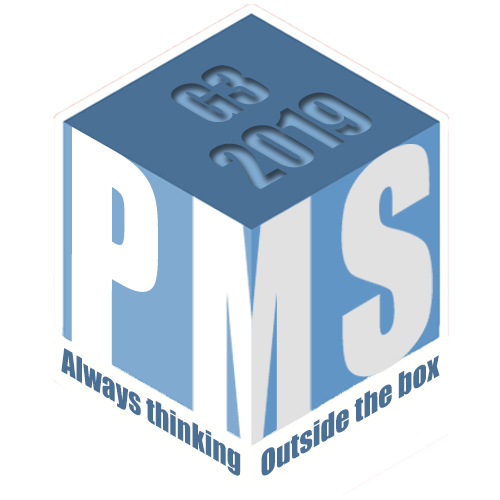
<style>
.page{position:relative;width:500px;height:500px;background:#ffffff}
.page>*{position:absolute;margin:0}
.t1{font:75.3px "Impact";scale:0.9 1}
.t2{font:273.2px "Impact";color:#ffffff;scale:0.81 1}
.t3{font:31.4px "Impact";color:#4a7095}
.t4{font:31.4px "Impact";color:#4a7095;scale:1.04 1}
</style>
<div class="page">
<p class="t1" style="left:171px;top:65px;width:99px;height:57px;rotate:-29deg">G3</p>
<p class="t2" style="left:71px;top:127px;width:87px;height:239px;rotate:30deg">P</p>
<p class="t3" style="left:61px;top:348px;width:180px;height:128px;rotate:30deg">Always thinking</p>
<p class="t4" style="left:261px;top:355px;width:179px;height:121px;rotate:-30deg">Outside the box</p>
</div>
